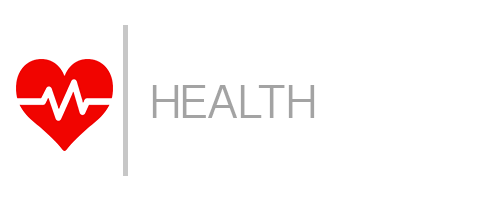
<style>
.page{position:relative;width:480px;height:200px;background:#ffffff}
.page>*{position:absolute;margin:0}
.t1{font:48px "MyanmarSangamMN";color:#a3a3a3}
</style>
<div class="page">
<p class="t1" style="left:152px;top:85px;width:163px;height:33px">HEALTH</p>
</div>
